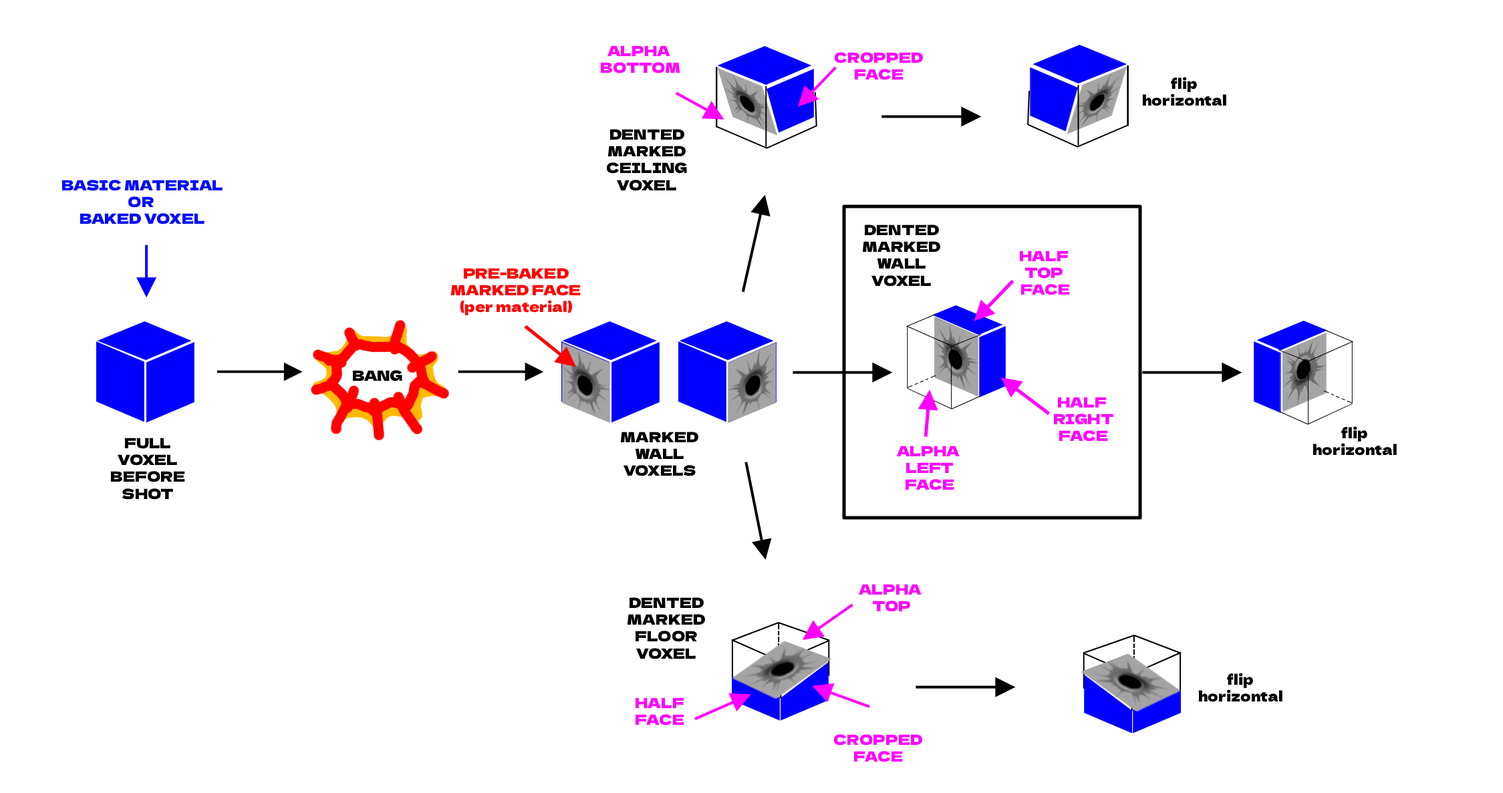
<style>
.page{position:relative;width:1503px;height:793px;background:#ffffff}
.page>*{position:absolute;margin:0}
.t1{font:14px "DelaGothicOne-Regular";color:#ff00ff}
.t2{font:14px "DelaGothicOne-Regular";color:#000000}
.t3{font:14px "DelaGothicOne-Regular";color:#000bff}
.t4{font:14px "DelaGothicOne-Regular";color:#ff0000}
</style>
<div class="page">
<p class="t1" style="left:600px;top:45px;width:80px;height:29px;text-align:center">ALPHA <br>BOTTOM</p>
<p class="t1" style="left:834px;top:52px;width:89px;height:28px;text-align:center">CROPPED<br>FACE</p>
<p class="t2" style="left:1142px;top:77px;width:84px;height:29px;text-align:center">flip<br>horizontal</p>
<p class="t2" style="left:606px;top:129px;width:81px;height:62px;text-align:center">DENTED<br>MARKED<br>CEILING<br>VOXEL</p>
<p class="t3" style="left:61px;top:180px;width:162px;height:45px;text-align:center">BASIC MATERIAL<br>OR <br>BAKED VOXEL</p>
<p class="t2" style="left:862px;top:225px;width:78px;height:62px;text-align:center">DENTED<br>MARKED<br>WALL<br>VOXEL</p>
<p class="t1" style="left:1019px;top:251px;width:51px;height:44px;text-align:center">HALF <br>TOP <br>FACE</p>
<p class="t4" style="left:450px;top:268px;width:131px;height:47px;text-align:center">PRE-BAKED<br>MARKED FACE<br>(per material)</p>
<p class="t2" style="left:352px;top:370px;width:50px;height:12px">BANG</p>
<p class="t1" style="left:1053px;top:397px;width:60px;height:45px;text-align:center">HALF <br>RIGHT<br>FACE</p>
<p class="t2" style="left:110px;top:438px;width:75px;height:62px;text-align:center">FULL<br>VOXEL<br>BEFORE<br>SHOT</p>
<p class="t2" style="left:620px;top:432px;width:78px;height:45px;text-align:center">MARKED<br>WALL<br>VOXELS</p>
<p class="t2" style="left:1313px;top:426px;width:84px;height:30px;text-align:center">flip<br>horizontal</p>
<p class="t1" style="left:897px;top:446px;width:63px;height:45px;text-align:center">ALPHA <br>LEFT<br>FACE</p>
<p class="t1" style="left:859px;top:584px;width:63px;height:28px;text-align:center">ALPHA <br>TOP</p>
<p class="t2" style="left:627px;top:597px;width:78px;height:63px;text-align:center">DENTED<br>MARKED<br>FLOOR<br>VOXEL</p>
<p class="t2" style="left:1198px;top:673px;width:85px;height:29px;text-align:center">flip<br>horizontal</p>
<p class="t1" style="left:635px;top:698px;width:49px;height:28px;text-align:center">HALF<br>FACE</p>
<p class="t1" style="left:833px;top:735px;width:89px;height:28px;text-align:center">CROPPED<br>FACE</p>
</div>
